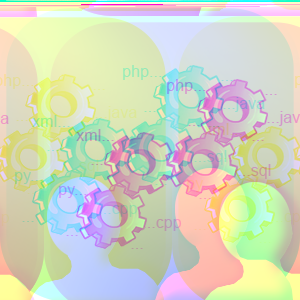
<style>
.page{position:relative;width:300px;height:300px}
.page>*{position:absolute;margin:0}
.t1{font:16.1px "ArialMT"}
</style>
<div class="page">
<p class="t1" style="left:123px;top:63px;width:39px;height:15px">php...</p>
<p class="t1" style="left:32px;top:113px;width:38px;height:12px">xml...</p>
<p class="t1" style="left:15px;top:170px;width:28px;height:12px">py...</p>
<p class="t1" style="left:99px;top:203px;width:39px;height:12px">...cpp</p>
</div>
